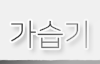
<style>
.page{position:relative;width:100px;height:64px;background:#f0f0f0}
.page>*{position:absolute;margin:0}
.t1{font:30px "NanumSquareL"}
</style>
<div class="page">
<p class="t1" style="left:11px;top:20px;width:76px;height:29px">가습기</p>
</div>
